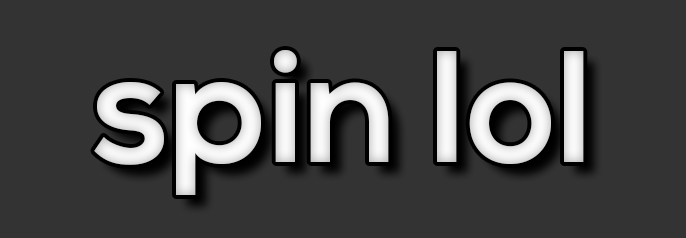
<style>
.page{position:relative;width:686px;height:238px;background:#333333}
.page>*{position:absolute;margin:0}
.t1{font:158.5px "NexaBold";color:#ffffff}
</style>
<div class="page">
<p class="t1" style="left:94px;top:50px;width:490px;height:145px">spin lol</p>
</div>
